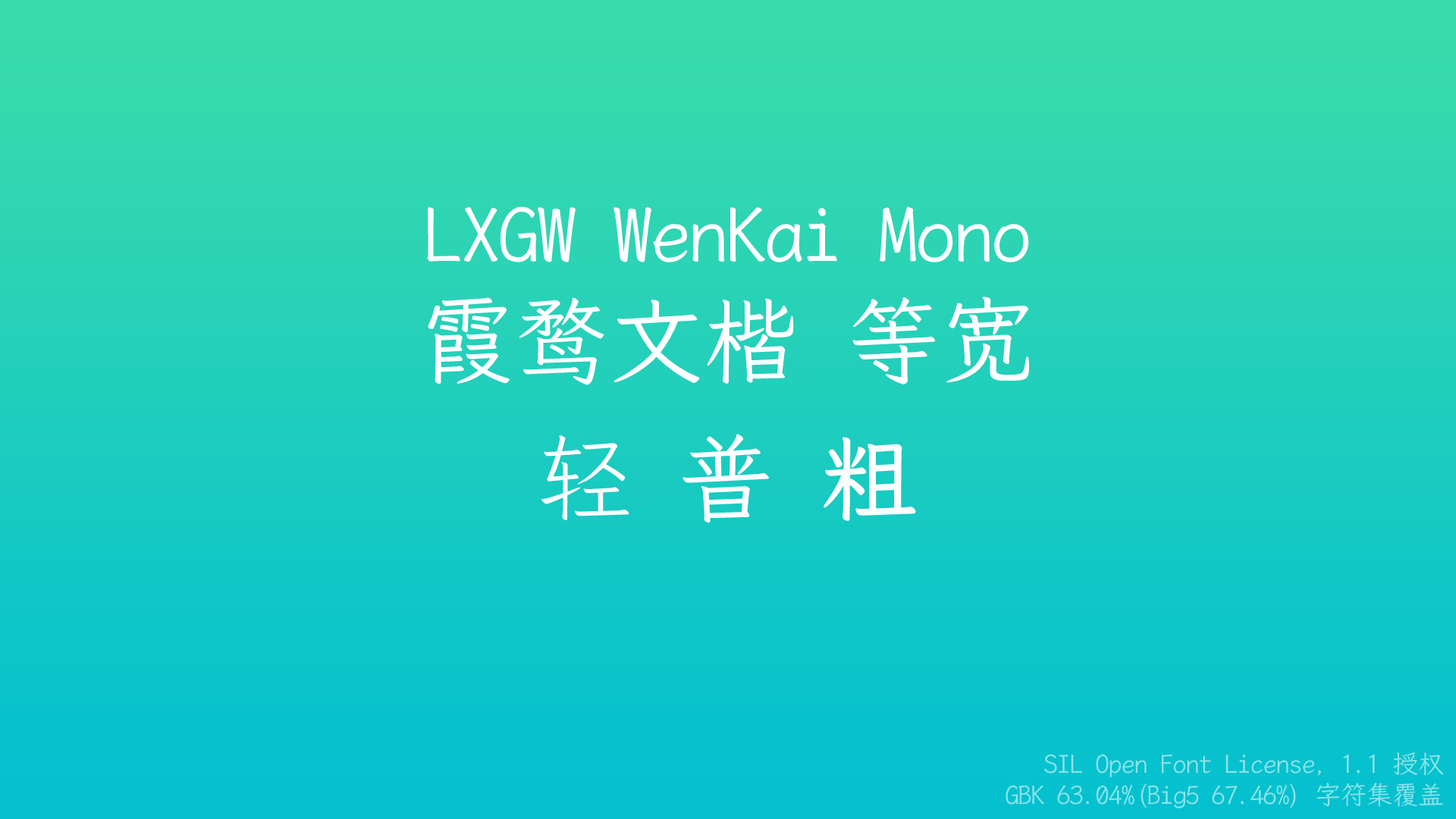
<style>
.page{position:relative;width:1456px;height:819px}
.page>*{position:absolute;margin:0}
.t1{font:75.8px "LXGWWenKaiMono-Regular";color:#ffffff}
.t2{font:94.8px "LXGWWenKaiMono-Regular";color:#ffffff}
.t3{font:94.8px "LXGWWenKaiMono-Light";color:#ffffff}
.t4{font:94.8px "LXGWWenKaiMono-Bold";color:#ffffff}
.t5{font:25.8px "LXGWWenKaiMono-Regular";color:#8ce3e9}
</style>
<div class="page">
<p class="t1" style="left:427px;top:206px;width:602px;height:179px;text-align:center">LXGW WenKai Mono<br><span class="t2">霞鹜文楷 等宽</span></p>
<p class="t3" style="left:541px;top:434px;width:375px;height:89px">轻 <span class="t2">普 </span><span class="t4">粗</span></p>
<p class="t5" style="left:1006px;top:751px;width:438px;height:57px;text-align:right">SIL Open Font License, 1.1 授权<br> GBK 63.04%(Big5 67.46%) 字符集覆盖</p>
</div>
